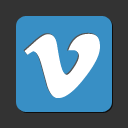
<style>
.page{position:relative;width:128px;height:128px;background:#333333}
.page>*{position:absolute;margin:0}
.t1{font:170.6px "BlackRose";letter-spacing:0.06em;color:#ffffff}
</style>
<div class="page">
<p class="t1" style="left:23px;top:32px;width:77px;height:66px">v</p>
</div>
